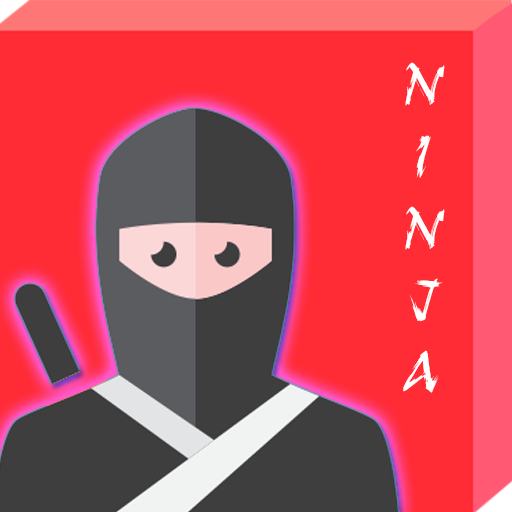
<style>
.page{position:relative;width:512px;height:512px;background:#ff2b35}
.page>*{position:absolute;margin:0}
.t1{font:60px "RuachLetPlain";letter-spacing:0.01em;color:#ffffff}
</style>
<div class="page">
<p class="t1" style="left:403px;top:62px;width:42px;height:331px;text-align:center">N<br>I<br>N<br>J<br>A</p>
</div>
